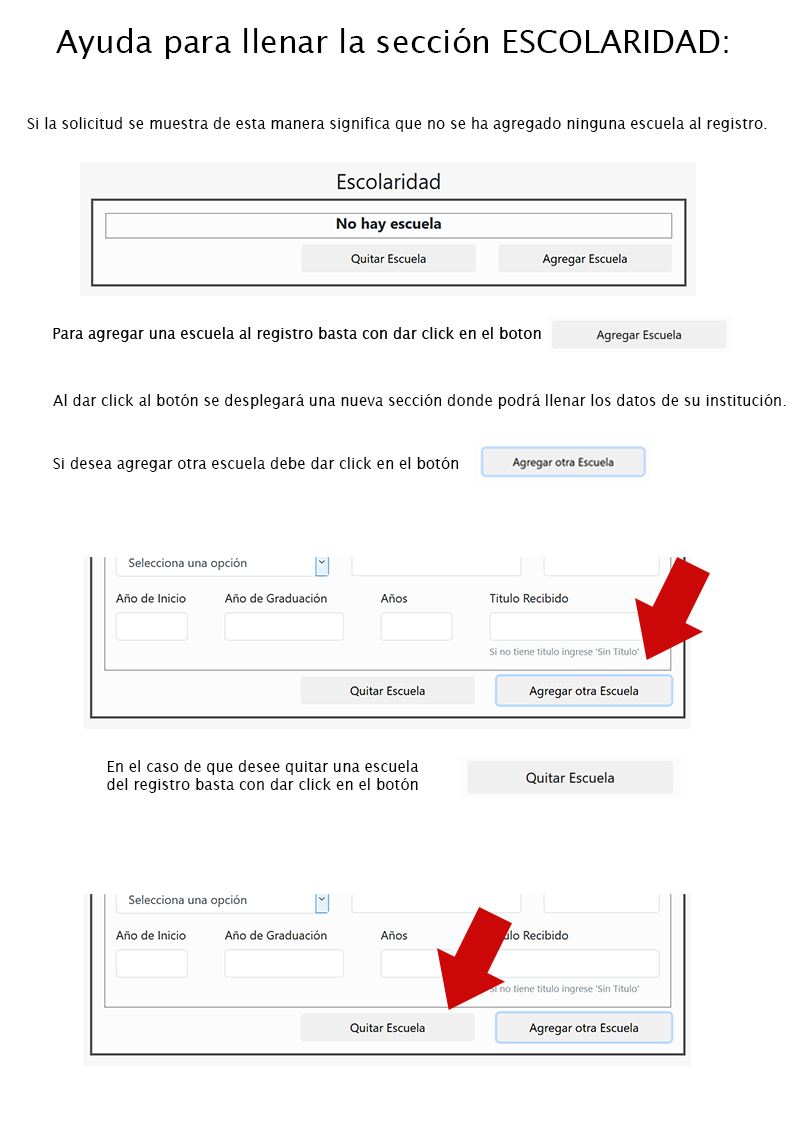
<style>
.page{position:relative;width:800px;height:1134px;background:#ffffff}
.page>*{position:absolute;margin:0}
.t1{font:32px "LucidaSans";color:#000000}
.t2{font:15px "LucidaSans";color:#000000}
</style>
<div class="page">
<p class="t1" style="left:56px;top:28px;width:672px;height:31px">Ayuda para llenar la sección ESCOLARIDAD:</p>
<p class="t2" style="left:27px;top:117px;width:740px;height:15px">Si la solicitud se muestra de esta manera significa que no se ha agregado ninguna escuela al registro.</p>
<p class="t2" style="left:53px;top:394px;width:733px;height:15px">Al dar click al botón se desplegará una nueva sección donde podrá llenar los datos de su institución.</p>
<p class="t2" style="left:53px;top:457px;width:406px;height:15px">Si desea agregar otra escuela debe dar click en el botón</p>
<p class="t2" style="left:107px;top:760px;width:312px;height:33px">En el caso de que desee quitar una escuela <br>del registro basta con dar click en el botón</p>
</div>
